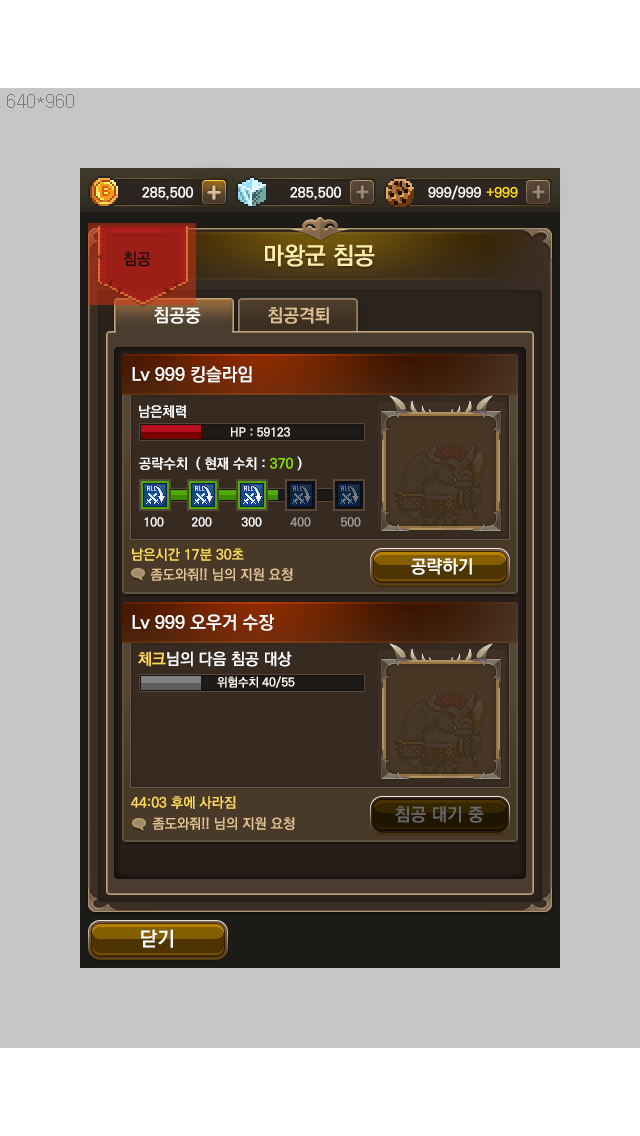
<style>
.page{position:relative;width:640px;height:1136px;background:#c6c6c6}
.page>*{position:absolute;margin:0}
.t1{font:24px "KoPubDotumBold";color:#ffedab}
.t2{font:16px "KoPubDotumBold";color:#1b0e0f}
.t3{font:18px "KoPubDotumBold";color:#ffffff}
.t4{font:18px "KoPubDotumBold";color:#e0c093}
.t5{font:14px "KoPubDotumBold";color:#fefefe}
.t6{font:12px "KoPubDotumBold";color:#fffcee}
.t7{font:14px "KoPubDotumBold";color:#ffffff}
.t8{font:14px "KoPubDotumBold";color:#8ae001}
.t9{font:12px "KoPubDotumBold";color:#fefefe}
.t10{font:12px "KoPubDotumBold";color:#a09f9d}
.t11{font:14px "KoPubDotumBold";color:#ffda5b}
.t12{font:14px "KoPubDotumBold";color:#e1c093}
.t13{font:16px "KoPubDotumBold";color:#fefefe}
.t14{font:16px "KoPubDotumBold";color:#ffda5b}
.t15{font:18px "KoPubDotumBold";color:#666666}
.t16{font:20px "KoPubDotumBold";color:#ffffff}
</style>
<div class="page">
<p class="t1" style="left:265px;top:244px;width:110px;height:23px">마왕군 침공</p>
<p class="t2" style="left:123px;top:251px;width:28px;height:16px">침공</p>
<p class="t3" style="left:154px;top:307px;width:47px;height:17px">침공중</p>
<p class="t4" style="left:268px;top:307px;width:61px;height:17px">침공격퇴</p>
<p class="t3" style="left:132px;top:366px;width:120px;height:17px">Lv 999 킹슬라임</p>
<p class="t5" style="left:139px;top:405px;width:47px;height:13px">남은체력</p>
<p class="t6" style="left:231px;top:427px;width:59px;height:10px">HP : 59123</p>
<p class="t5" style="left:139px;top:457px;width:48px;height:13px">공략수치</p>
<p class="t7" style="left:196px;top:456px;width:106px;height:15px">( 현재 수치 : <span class="t8">370</span> )</p>
<p class="t9" style="left:144px;top:517px;width:20px;height:10px">100</p>
<p class="t9" style="left:192px;top:517px;width:20px;height:10px">200</p>
<p class="t9" style="left:241px;top:517px;width:21px;height:10px">300</p>
<p class="t10" style="left:290px;top:517px;width:21px;height:10px">400</p>
<p class="t10" style="left:341px;top:517px;width:20px;height:10px">500</p>
<p class="t11" style="left:132px;top:548px;width:112px;height:13px">남은시간 17분 30초</p>
<p class="t3" style="left:411px;top:558px;width:61px;height:17px">공략하기</p>
<p class="t12" style="left:150px;top:568px;width:143px;height:13px">좀도와줘!! 님의 지원 요청</p>
<p class="t3" style="left:132px;top:614px;width:142px;height:17px">Lv 999 오우거 수장</p>
<p class="t13" style="left:138px;top:651px;width:154px;height:16px"><span class="t14">체크</span>님의 다음 침공 대상</p>
<p class="t6" style="left:217px;top:676px;width:78px;height:12px">위험수치 40/55</p>
<p class="t11" style="left:131px;top:796px;width:105px;height:13px">44:03 후에 사라짐</p>
<p class="t15" style="left:395px;top:806px;width:89px;height:17px">침공 대기 중</p>
<p class="t12" style="left:152px;top:817px;width:143px;height:13px">좀도와줘!! 님의 지원 요청</p>
<p class="t16" style="left:141px;top:929px;width:32px;height:19px">닫기</p>
</div>
